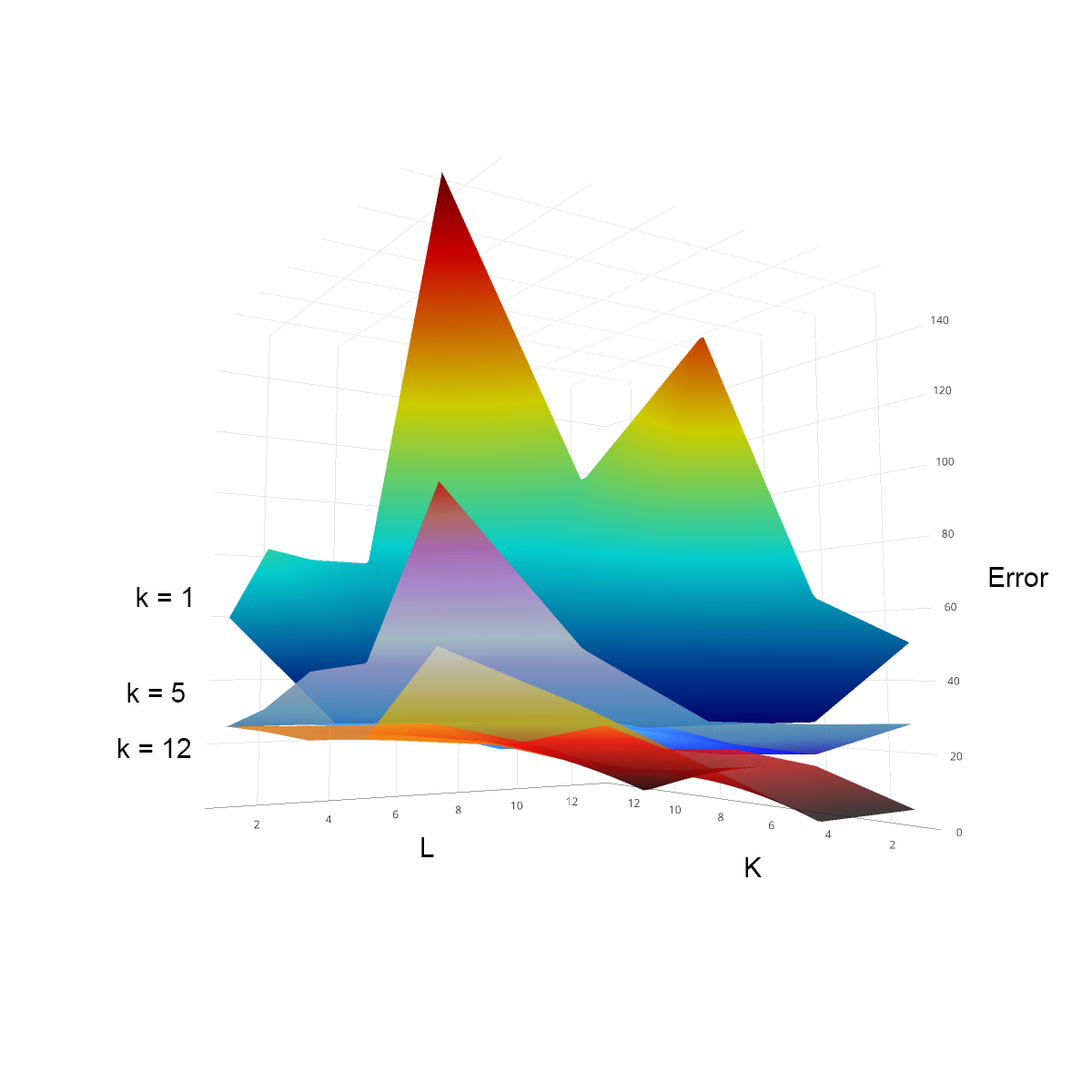
<style>
.page{position:relative;width:1092px;height:1092px;background:#ffffff}
.page>*{position:absolute;margin:0}
.t1{font:27.3px "ArialMT";color:#000000}
</style>
<div class="page">
<p class="t1" style="left:989px;top:567px;width:60px;height:20px">Error</p>
<p class="t1" style="left:136px;top:587px;width:55px;height:20px">k = 1</p>
<p class="t1" style="left:127px;top:682px;width:58px;height:21px">k = 5</p>
<p class="t1" style="left:118px;top:738px;width:73px;height:20px">k = 12</p>
<p class="t1" style="left:421px;top:837px;width:13px;height:20px">L</p>
<p class="t1" style="left:745px;top:857px;width:17px;height:20px">K</p>
</div>
